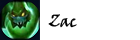
<style>
.page{position:relative;width:140px;height:40px;background:#ffffff}
.page>*{position:absolute;margin:0}
.t1{font:16px "VinerHandITC";color:#000000}
</style>
<div class="page">
<p class="t1" style="left:48px;top:14px;width:29px;height:14px">Zac</p>
</div>
